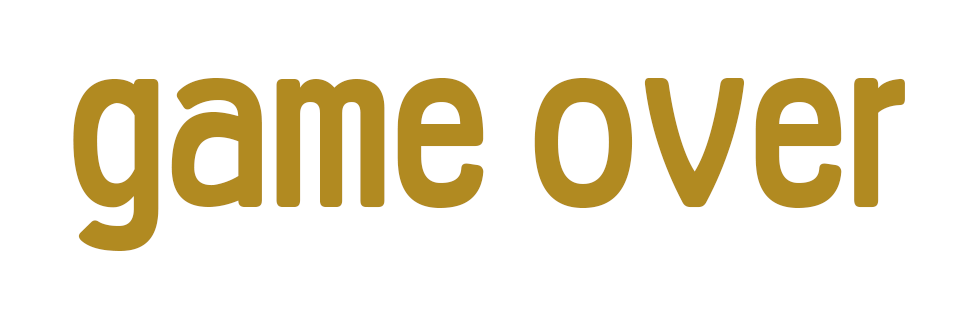
<style>
.page{position:relative;width:976px;height:315px;background:#ffffff}
.page>*{position:absolute;margin:0}
.t1{font:166.7px "YANGJIN";letter-spacing:-0.02em;color:#b18a21;scale:0.91 1}
</style>
<div class="page">
<p class="t1" style="left:73px;top:78px;width:832px;height:173px">game over</p>
</div>
